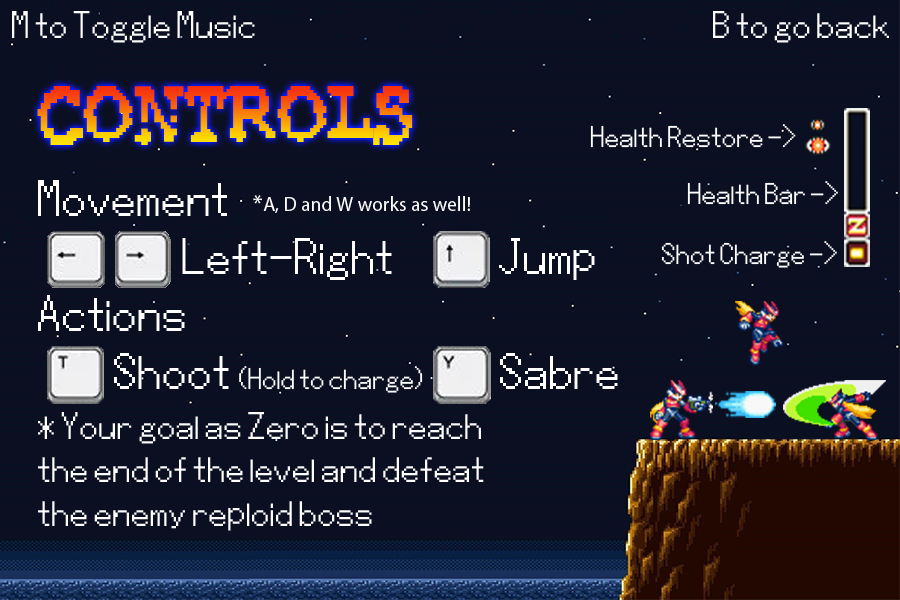
<style>
.page{position:relative;width:900px;height:600px;background:#0c0f22}
.page>*{position:absolute;margin:0}
.t1{font:18px "Mega-Man-ZX";color:#ffffff}
.t2{font:65px "RubberBiscuitBold"}
.t3{font:14px "Mega-Man-ZX";color:#ffffff}
.t4{font:24px "Mega-Man-ZX";color:#ffffff}
.t5{font:19.9px "MyriadPro-Regular";color:#ffffff}
.t6{font:23.9px "MyriadPro-Regular";color:#ffffff}
</style>
<div class="page">
<p class="t1" style="left:12px;top:11px;width:243px;height:32px">M to Toggle Music</p>
<p class="t1" style="left:713px;top:11px;width:176px;height:32px">B to go back</p>
<p class="t2" style="left:37px;top:86px;width:376px;height:59px">Controls</p>
<p class="t3" style="left:590px;top:124px;width:206px;height:24px">Health Restore -&gt;</p>
<p class="t1" style="left:38px;top:180px;width:580px;height:351px"><span class="t4">Movement<br><br>                     Left-Right               Jump<br><br>Actions<br><br>           Shoot </span><span class="t3">(Hold to charge)</span><span class="t4">           Sabre<br><br></span>* Your goal as Zero is to reach <br><br>the end of the level and defeat <br><br>the enemy reploid boss</p>
<p class="t3" style="left:687px;top:181px;width:151px;height:24px">Health Bar -&gt;</p>
<p class="t5" style="left:253px;top:195px;width:217px;height:18px"><span class="t6">*</span>A, D and W works as well!</p>
<p class="t3" style="left:661px;top:241px;width:176px;height:27px">Shot Charge -&gt;</p>
</div>
